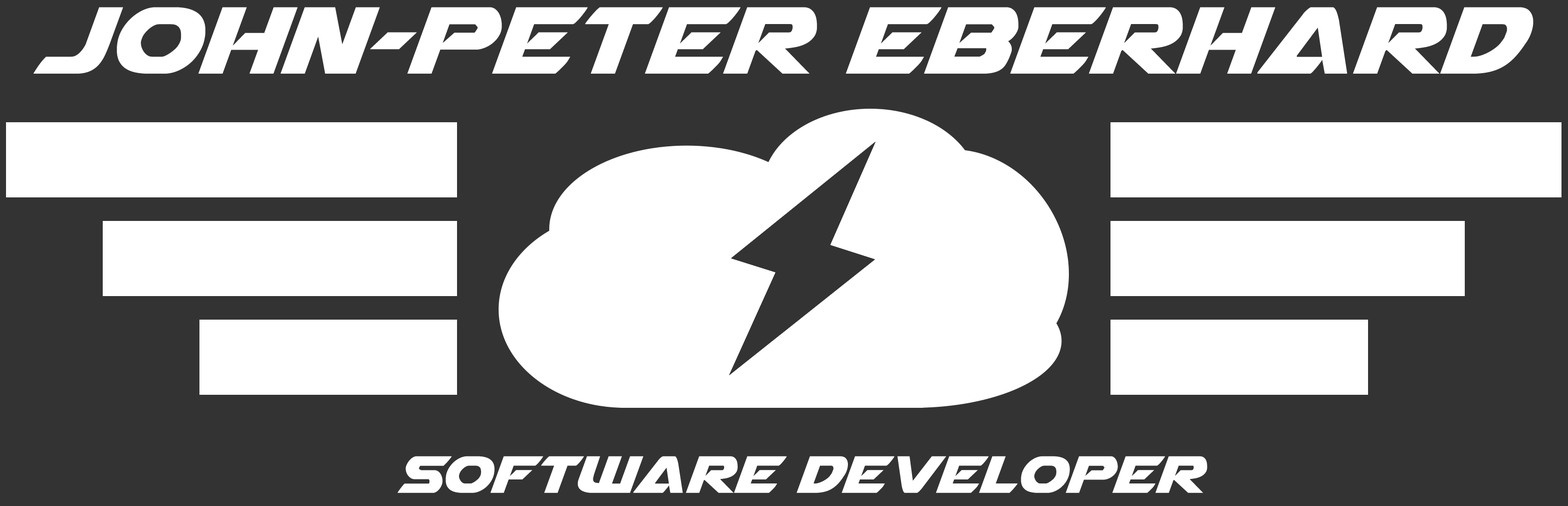
<style>
.page{position:relative;width:1568px;height:506px;background:#333333}
.page>*{position:absolute;margin:0}
.t1{font:125.3px "Airstrike";color:#ffffff}
.t2{font:68.9px "Airstrike";color:#ffffff}
</style>
<div class="page">
<p class="t1" style="left:33px;top:7px;width:1500px;height:67px">John-Peter Eberhard</p>
<p class="t2" style="left:397px;top:456px;width:810px;height:37px">Software Developer</p>
</div>
